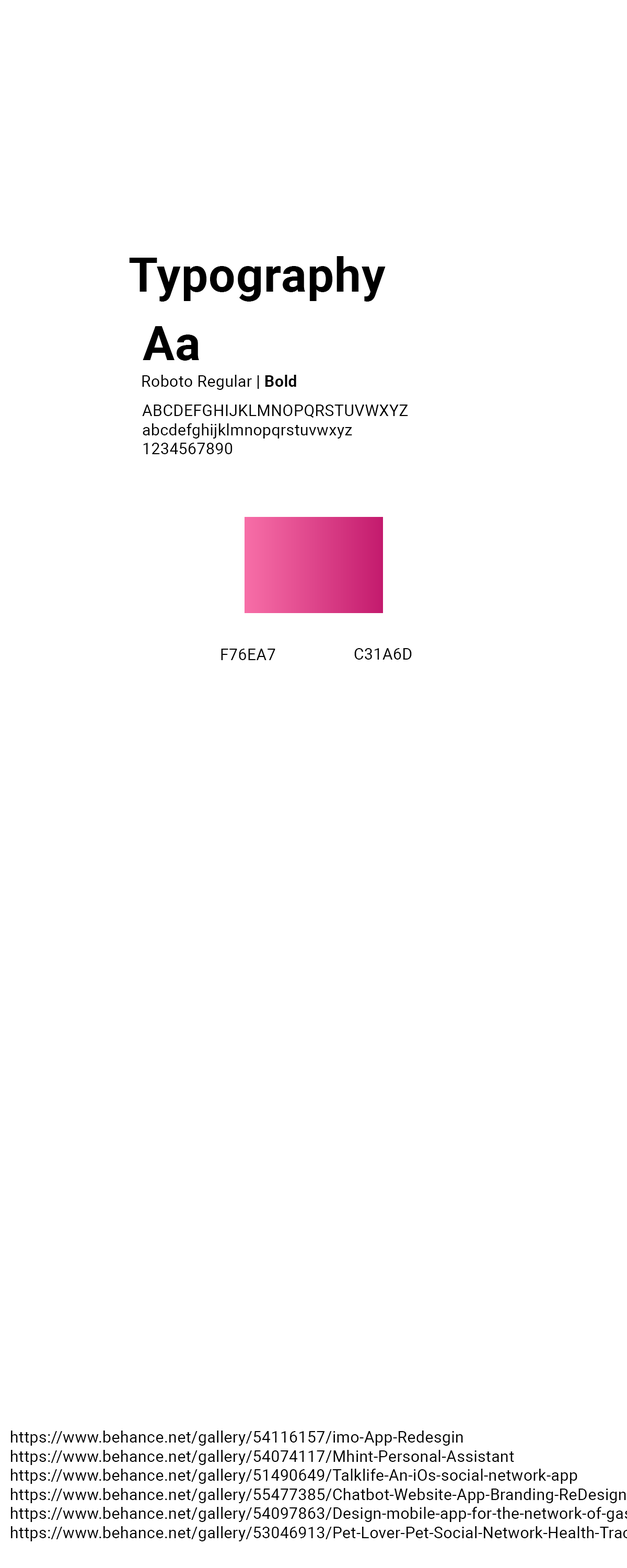
<style>
.page{position:relative;width:627px;height:1568px;background:#ffffff}
.page>*{position:absolute;margin:0}
.t1{font:47.8px "Roboto-Bold";letter-spacing:0.01em;color:#000000}
.t2{font:6.3px "Roboto-Regular";letter-spacing:0.01em;color:#000000}
.t3{font:6.3px "Roboto-Bold";letter-spacing:0.01em;color:#000000}
.t4{font:15.9px "Roboto-Regular";letter-spacing:0.01em;color:#000000}
.t5{font:6.3px/63.7px "Roboto-Regular";letter-spacing:0.01em;color:#000000}
</style>
<div class="page">
<p class="t1" style="left:129px;top:256px;width:257px;height:46px">Typography</p>
<p class="t1" style="left:143px;top:326px;width:56px;height:35px">Aa</p>
<p class="t2" style="left:142px;top:375px;width:154px;height:15px">Roboto Regular | <span class="t3">Bold</span></p>
<p class="t4" style="left:142px;top:405px;width:266px;height:49px">ABCDEFGHIJKLMNOPQRSTUVWXYZ<br>abcdefghijklmnopqrstuvwxyz<br>1234567890</p>
<p class="t5" style="left:221px;top:649px;width:54px;height:11px">F76EA7</p>
<p class="t5" style="left:354px;top:648px;width:58px;height:12px">C31A6D</p>
</div>
